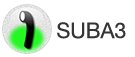
<style>
.page{position:relative;width:135px;height:57px;background:#ffffff}
.page>*{position:absolute;margin:0}
.t1{font:21.5px "HelveticaNeue";color:#353535}
</style>
<div class="page">
<p class="t1" style="left:57px;top:22px;width:69px;height:17px">SUBA3</p>
</div>
